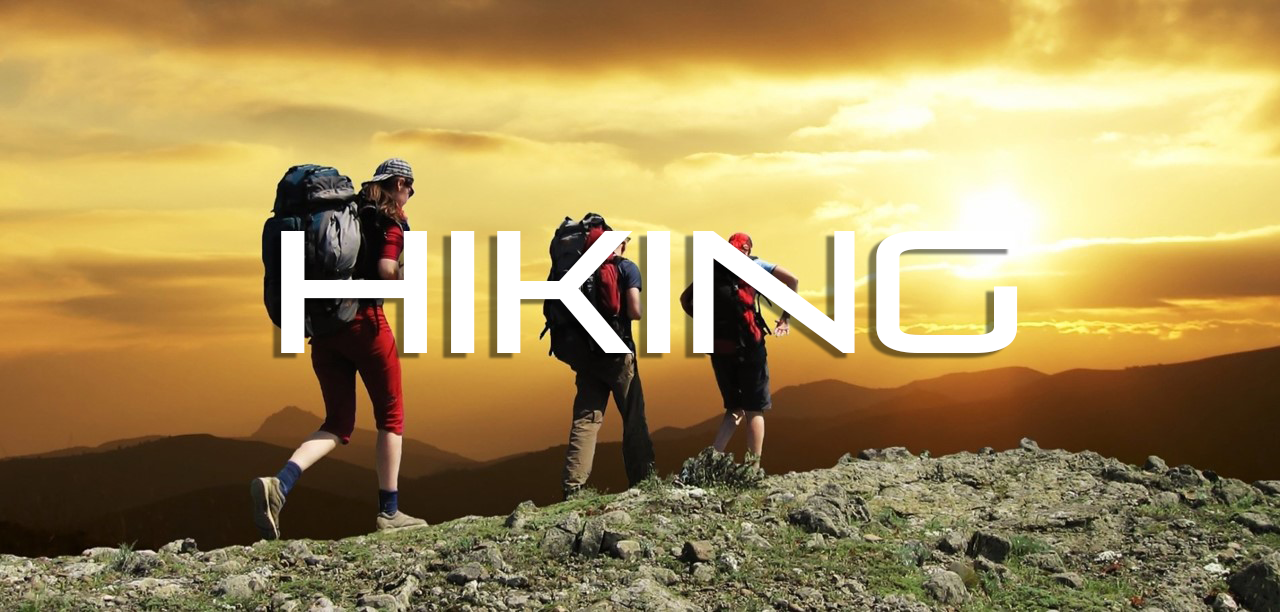
<style>
.page{position:relative;width:1280px;height:612px}
.page>*{position:absolute;margin:0}
.t1{font:173.3px "PirulenRg-Regular";color:#ffffff}
</style>
<div class="page">
<p class="t1" style="left:281px;top:231px;width:737px;height:122px">hiking</p>
</div>
